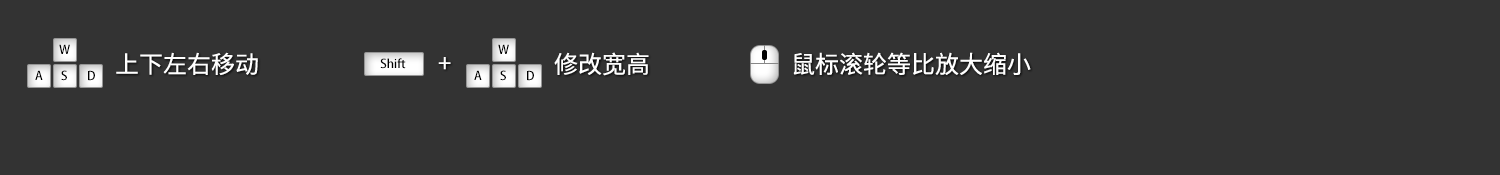
<style>
.page{position:relative;width:1500px;height:175px;background:#333333}
.page>*{position:absolute;margin:0}
.t1{font:12px "AdobeHeitiStd-Regular";color:#000000}
.t2{font:24px "SourceHanSansCN-Regular";color:#ffffff}
</style>
<div class="page">
<p class="t1" style="left:59px;top:44px;width:11px;height:10px">W</p>
<p class="t2" style="left:116px;top:52px;width:142px;height:23px">上下左右移动</p>
<p class="t1" style="left:498px;top:44px;width:11px;height:10px">W</p>
<p class="t2" style="left:554px;top:52px;width:95px;height:24px">修改宽高</p>
<p class="t2" style="left:793px;top:52px;width:238px;height:23px">鼠标滚轮等比放大缩小</p>
<p class="t1" style="left:380px;top:58px;width:26px;height:11px">Shift</p>
<p class="t2" style="left:438px;top:57px;width:13px;height:13px">+</p>
<p class="t1" style="left:35px;top:70px;width:8px;height:10px">A</p>
<p class="t1" style="left:61px;top:70px;width:6px;height:11px">S</p>
<p class="t1" style="left:88px;top:70px;width:7px;height:11px">D</p>
<p class="t1" style="left:474px;top:70px;width:8px;height:10px">A</p>
<p class="t1" style="left:500px;top:70px;width:6px;height:11px">S</p>
<p class="t1" style="left:527px;top:70px;width:7px;height:11px">D</p>
</div>
